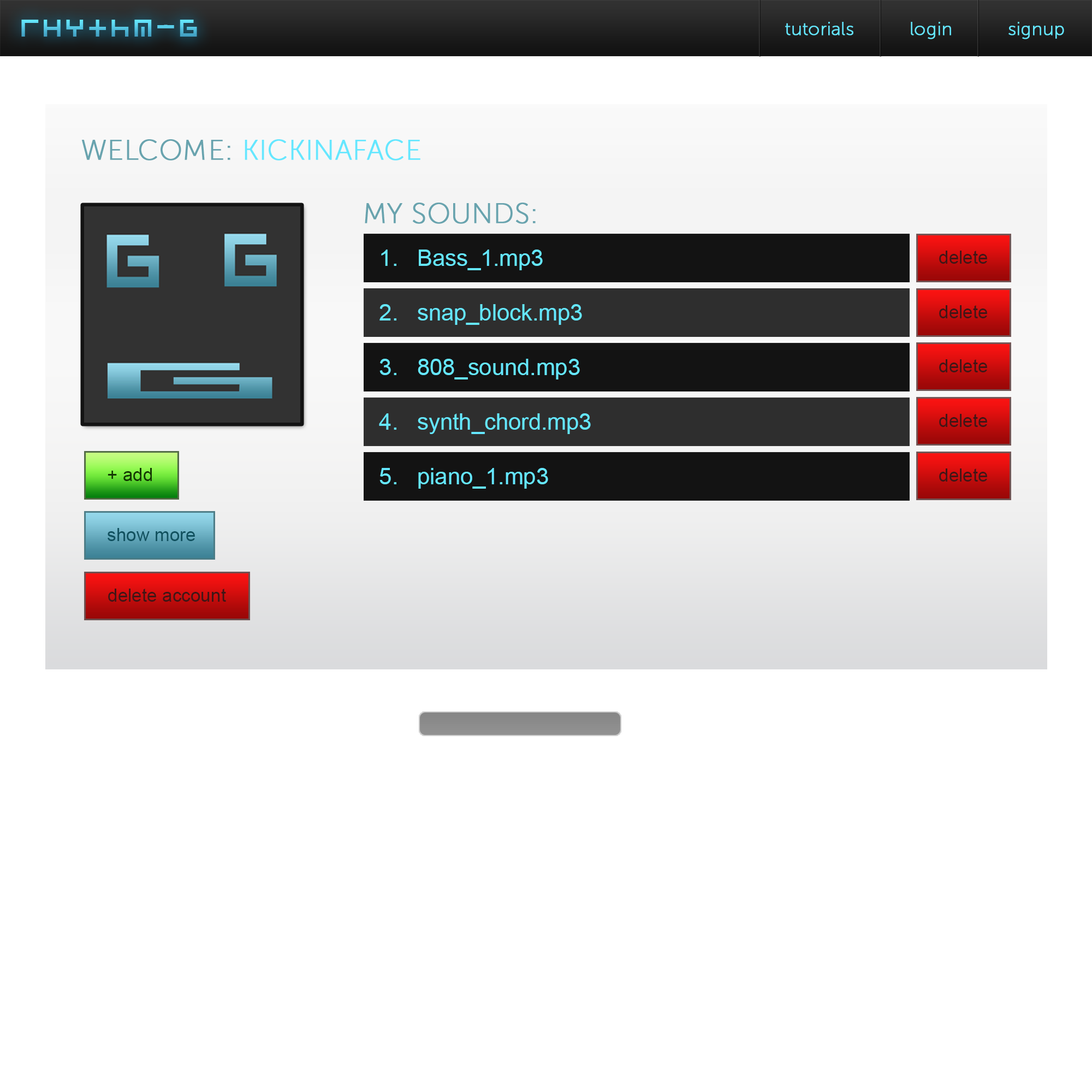
<style>
.page{position:relative;width:1092px;height:1092px;background:#ffffff}
.page>*{position:absolute;margin:0}
.t1{font:33.5px "Beatbox"}
.t2{font:18.2px "MuseoSans-100";color:#65e7ff;font-weight:bold}
.t3{font:27.8px "MuseoSans-100";color:#65e7ff;font-weight:bold}
.t4{font:27.8px "MuseoSans-100";color:#68a3ae;font-weight:bold}
.t5{font:22.7px "ArialMT";color:#65e7ff}
.t6{font:18.2px "ArialMT";color:#411616}
.t7{font:18.2px "ArialMT";color:#143703}
.t8{font:18.2px "ArialMT";color:#10515f}
</style>
<div class="page">
<p class="t1" style="left:21px;top:20px;width:176px;height:17px">rHYThm-G</p>
<p class="t2" style="left:785px;top:22px;width:279px;height:17px">tutorials          login          signup</p>
<p class="t3" style="left:82px;top:139px;width:338px;height:22px"><span class="t4">WELCOM E:</span> KICKINAFACE</p>
<p class="t4" style="left:365px;top:203px;width:171px;height:21px">MY SOUNDS:</p>
<p class="t5" style="left:381px;top:250px;width:162px;height:20px">1.   Bass_1.mp3</p>
<p class="t6" style="left:939px;top:251px;width:48px;height:13px">delete</p>
<p class="t5" style="left:379px;top:304px;width:203px;height:21px">2.   snap_block.mp3</p>
<p class="t6" style="left:939px;top:305px;width:48px;height:13px">delete</p>
<p class="t5" style="left:379px;top:359px;width:201px;height:20px">3.   808_sound.mp3</p>
<p class="t6" style="left:939px;top:359px;width:48px;height:13px">delete</p>
<p class="t5" style="left:379px;top:413px;width:212px;height:21px">4.   synth_chord.mp3</p>
<p class="t6" style="left:939px;top:414px;width:48px;height:13px">delete</p>
<p class="t7" style="left:108px;top:468px;width:44px;height:13px">+ add</p>
<p class="t5" style="left:379px;top:468px;width:169px;height:21px">5.   piano_1.mp3</p>
<p class="t6" style="left:939px;top:468px;width:48px;height:14px">delete</p>
<p class="t8" style="left:108px;top:528px;width:87px;height:13px">show more</p>
<p class="t6" style="left:108px;top:589px;width:118px;height:13px">delete account</p>
</div>
